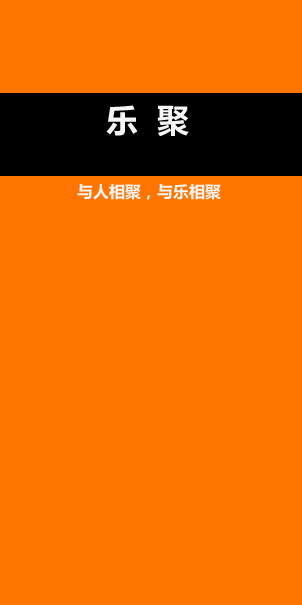
<style>
.page{position:relative;width:302px;height:605px;background:#ff7500}
.page>*{position:absolute;margin:0}
.t1{font:32px "MicrosoftYaHei-Bold";color:#f5f5f5}
.t2{font:16px "MicrosoftYaHei-Bold";color:#f5f5f5}
</style>
<div class="page">
<p class="t1" style="left:106px;top:105px;width:83px;height:32px">乐  聚</p>
<p class="t2" style="left:77px;top:184px;width:144px;height:16px">与人相聚，与乐相聚</p>
</div>
